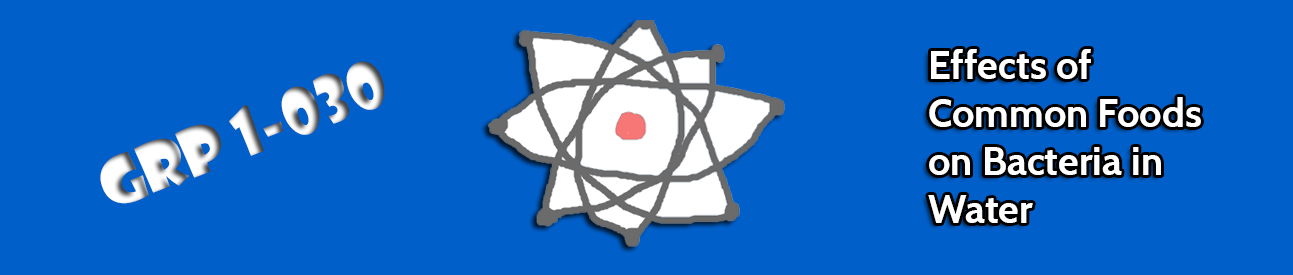
<style>
.page{position:relative;width:1293px;height:275px;background:#005fc9}
.page>*{position:absolute;margin:0}
.t1{font:40px "Cabin-Bold";color:#ffffff}
.t2{font:64px "ShowcardGothic-Reg"}
</style>
<div class="page">
<p class="t1" style="left:928px;top:49px;width:273px;height:174px">Effects of Common Foods on Bacteria in Water</p>
<p class="t2" style="left:100px;top:61px;width:285px;height:143px;rotate:-21deg">GRP 1-030</p>
</div>
